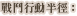
<style>
.page{position:relative;width:77px;height:16px;background:#dfd4cb}
.page>*{position:absolute;margin:0}
.t1{font:11px "RyuminPr6N-ExBold";color:#534738}
</style>
<div class="page">
<p class="t1" style="left:1px;top:2px;width:67px;height:12px">戰鬥行動半徑</p>
</div>
